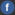
<style>
.page{position:relative;width:15px;height:15px;background:#3b5f97}
.page>*{position:absolute;margin:0}
.t1{font:10.5px "Arial-BoldMT";letter-spacing:0.025em}
</style>
<div class="page">
<p class="t1" style="left:5px;top:3px;width:5px;height:8px">f</p>
</div>
